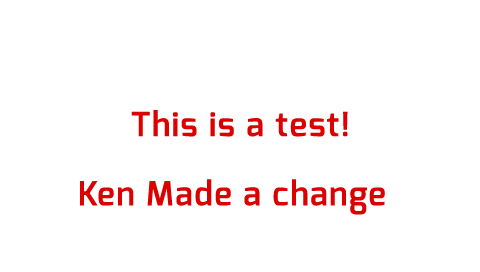
<style>
.page{position:relative;width:480px;height:272px;background:#ffffff}
.page>*{position:absolute;margin:0}
.t1{font:33.2px "Exo-DemiBold";letter-spacing:0.05em;color:#dd0000}
</style>
<div class="page">
<p class="t1" style="left:131px;top:110px;width:217px;height:27px">This is a test!</p>
<p class="t1" style="left:80px;top:179px;width:305px;height:36px">Ken Made a change</p>
</div>
